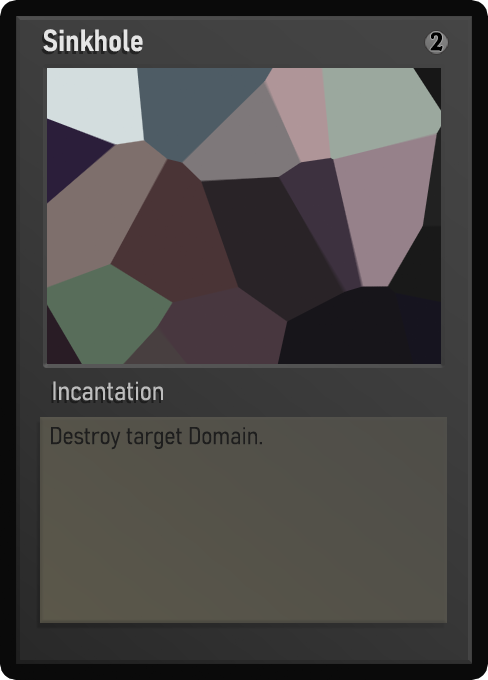
<style>
.page{position:relative;width:488px;height:680px}
.page>*{position:absolute;margin:0}
.t1{font:30px "Bahnschrift-SemiBoldSemiCondensed";color:#f2f2f2;font-weight:bold}
.t2{font:25px "WTRRoycroft";color:#000000;font-weight:bold;scale:1.09 1}
.t3{font:26px "Bahnschrift-LightSemiCondensed";color:#c8c8c8;font-weight:bold}
.t4{font:24px "Bahnschrift-LightSemiCondensed";color:#1e1e1e;font-weight:bold}
</style>
<div class="page">
<p class="t1" style="left:43px;top:29px;width:100px;height:23px;opacity:0.9">Sinkhole</p>
<p class="t2" style="left:430px;top:32px;width:13px;height:19px">2</p>
<p class="t3" style="left:53px;top:381px;width:110px;height:20px;opacity:0.9">Incantation</p>
<p class="t4" style="left:51px;top:427px;width:211px;height:23px">Destroy target Domain.</p>
</div>
